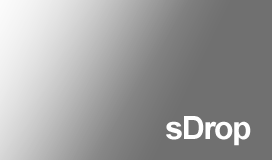
<style>
.page{position:relative;width:272px;height:160px;background:#707070}
.page>*{position:absolute;margin:0}
.t1{font:32px "Arial-BoldMT";letter-spacing:-0.05em;color:#ffffff}
</style>
<div class="page">
<p class="t1" style="left:166px;top:116px;width:85px;height:30px">sDrop</p>
</div>
